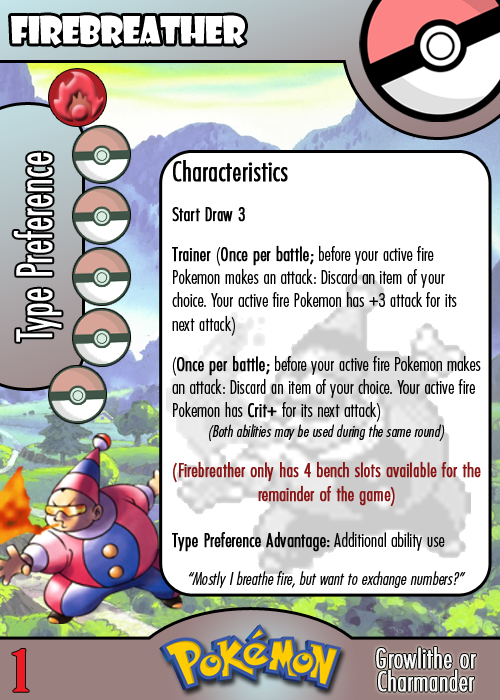
<style>
.page{position:relative;width:500px;height:700px;background:#ffffff}
.page>*{position:absolute;margin:0}
.t1{font:36.7px "ShowcardGothic-Reg";letter-spacing:-0.025em;color:#ffffff;scale:0.91 1}
.t2{font:46.7px "Futura-CondensedLight";color:#ffffff;font-weight:bold;scale:0.83 1}
.t3{font:19.4px "FuturaCondensedBQ-Light";color:#010101}
.t4{font:27.8px "FuturaCondensedBQ-Light";color:#010101;font-weight:bold}
.t5{font:19.4px "FuturaCondensedBQ-Light";color:#010101;font-weight:bold}
.t6{font:16.7px "FuturaCondensedBQ-Light";color:#010101;font-style:italic}
.t7{font:19.4px "FuturaCondensedBQ-Light";color:#881414;font-weight:bold}
.t8{font:18.1px "FuturaCondensedBQ-Light";color:#010101;font-style:italic}
.t9{font:55.6px "BirchStd";color:#ed1c24;font-weight:bold;scale:1.5 1}
.t10{font:27.8px "FuturaCondensedBQ-Light";color:#f9f9f9;font-weight:bold}
</style>
<div class="page">
<p class="t1" style="left:11px;top:15px;width:234px;height:31px">Firebreather</p>
<p class="t2" style="left:13px;top:152px;width:49px;height:190px;rotate:-90deg">Type Preference</p>
<p class="t3" style="left:172px;top:160px;width:309px;height:392px"><span class="t4">Characteristics<br><br></span><span class="t5">Start Draw 3<br><br>Trainer </span>(<span class="t5">Once per battle; </span>before your active fire Pokemon makes an attack: Discard an item of your choice. Your active fire Pokemon has +3 attack for its next attack)<br><br>(<span class="t5">Once per battle; </span>before your active fire Pokemon makes an attack: Discard an item of your choice. Your active fire Pokemon has <span class="t5">Crit+ </span>for its next attack)<br><span class="t6"> (Both abilities may be used during the same round)<br><br></span><span class="t7">(Firebreather only has 4 bench slots available for the remainder of the game)<br><br></span><span class="t5">Type Preference Advantage:</span> Additional ability use</p>
<p class="t8" style="left:188px;top:571px;width:278px;height:17px">“Mostly I breathe fire, but want to exchange numbers?”</p>
<p class="t9" style="left:12px;top:649px;width:17px;height:43px">1</p>
<p class="t10" style="left:376px;top:647px;width:100px;height:22px">Growlithe or</p>
<p class="t10" style="left:378px;top:669px;width:96px;height:23px">Charmander</p>
</div>
